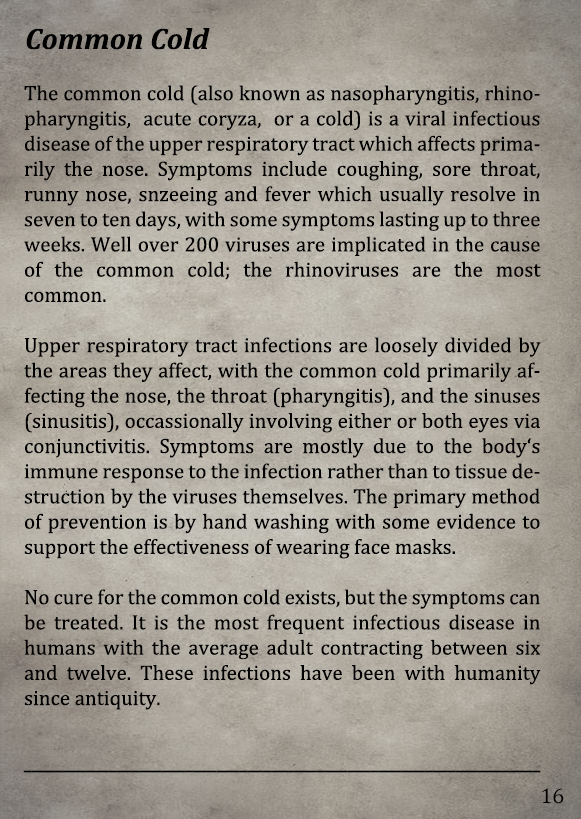
<style>
.page{position:relative;width:581px;height:819px}
.page>*{position:absolute;margin:0}
.t1{font:30px "Cambria-BoldItalic";color:#000000}
.t2{font:21px "Cambria";color:#000000}
.t3{font:21px "Arimo";color:#000000;scale:0.66 1}
.t4{font:21.5px "Cambria";color:#000000}
</style>
<div class="page">
<p class="t1" style="left:26px;top:28px;width:184px;height:22px">Common Cold</p>
<p class="t2" style="left:24px;top:85px;width:517px;height:625px;text-align:justify">The common cold (also known as nasopharyngitis, rhinopharyngitis,  acute coryza,  or a cold) is a viral infectious disease of the upper respiratory tract which affects primarily the nose. Symptoms include coughing, sore throat, runny nose, snzeeing and fever which usually resolve in seven to ten days, with some symptoms lasting up to three weeks. Well over 200 viruses are implicated in the cause of the common cold; the rhinoviruses are the most common.<br><br>Upper respiratory tract infections are loosely divided by the areas they affect, with the common cold primarily affecting the nose, the throat (pharyngitis), and the sinuses (sinusitis), occassionally involving either or both eyes via conjunctivitis. Symptoms are mostly due to the body‘s immune response to the infection rather than to tissue destruction by the viruses themselves. The primary method of prevention is by hand washing with some evidence to support the effectiveness of wearing face masks.<br><br>No cure for the common cold exists, but the symptoms can be treated. It is the most frequent infectious disease in humans with the average adult contracting between six and twelve. These infections have been with humanity since antiquity.</p>
<p class="t3" style="left:23px;top:770px;width:518px;height:3px">___________________________________________________________________</p>
<p class="t4" style="left:542px;top:788px;width:22px;height:16px">16</p>
</div>
